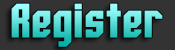
<style>
.page{position:relative;width:175px;height:50px;background:#333333}
.page>*{position:absolute;margin:0}
.t1{font:47.9px "Whitestone-Bold"}
</style>
<div class="page">
<p class="t1" style="left:11px;top:3px;width:152px;height:44px">Register</p>
</div>
